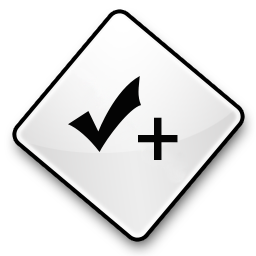
<style>
.page{position:relative;width:256px;height:256px;background:#ffffff}
.page>*{position:absolute;margin:0}
.t1{font:79.2px "MyriadPro-Bold";letter-spacing:0.005em;color:#040404;scale:0.97 1}
</style>
<div class="page">
<p class="t1" style="left:138px;top:117px;width:40px;height:43px">+</p>
</div>
